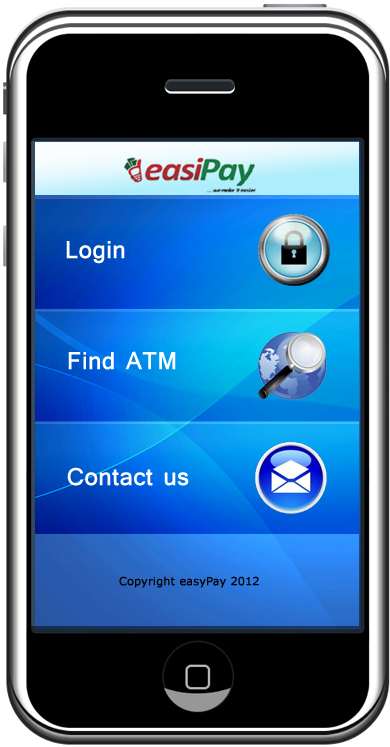
<style>
.page{position:relative;width:390px;height:747px;background:#000000}
.page>*{position:absolute;margin:0}
.t1{font:30px "Tunga";color:#ffffff;font-weight:bold}
.t2{font:11px "Verdana";color:#000000;font-weight:bold}
</style>
<div class="page">
<p class="t1" style="left:66px;top:241px;width:59px;height:23px">Login</p>
<p class="t1" style="left:68px;top:351px;width:108px;height:19px">Find ATM</p>
<p class="t1" style="left:67px;top:467px;width:122px;height:19px">Contact us</p>
<p class="t2" style="left:119px;top:576px;width:140px;height:12px">Copyright easyPay 2012</p>
</div>
